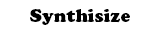
<style>
.page{position:relative;width:159px;height:31px;background:#ffffff}
.page>*{position:absolute;margin:0}
.t1{font:18px "CooperBlackStd";color:#000000}
</style>
<div class="page">
<p class="t1" style="left:30px;top:9px;width:100px;height:16px">Synthisize</p>
</div>
